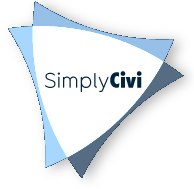
<style>
.page{position:relative;width:194px;height:189px;background:#ffffff}
.page>*{position:absolute;margin:0}
.t1{font:20.6px "Typ1451";color:#02253b}
.t2{font:20.6px "Futura-CondensedExtraBold";color:#02253b}
</style>
<div class="page">
<p class="t1" style="left:45px;top:71px;width:97px;height:21px">Simply<span class="t2">Civi</span></p>
</div>
